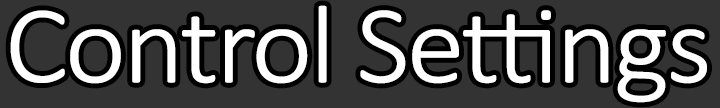
<style>
.page{position:relative;width:720px;height:108px;background:#333333}
.page>*{position:absolute;margin:0}
.t1{font:111.1px "Calibri-Light";letter-spacing:-0.05em;color:#ffffff;font-weight:bold;scale:1.05 1}
</style>
<div class="page">
<p class="t1" style="left:10px;top:5px;width:697px;height:98px">Control Settings</p>
</div>
